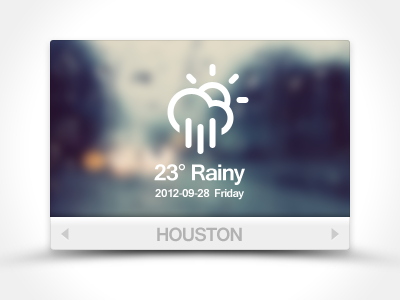
<style>
.page{position:relative;width:400px;height:300px}
.page>*{position:absolute;margin:0}
.t1{font:24px "Gautami-Bold";letter-spacing:-0.05em;color:#ffffff}
.t2{font:12px "Gautami-Bold";letter-spacing:-0.05em;color:#ffffff}
.t3{font:20px "Gautami-Bold";letter-spacing:-0.05em;color:#b2b2b2;text-transform:uppercase}
</style>
<div class="page">
<p class="t1" style="left:154px;top:164px;width:91px;height:21px">23° Rainy</p>
<p class="t2" style="left:155px;top:189px;width:89px;height:11px">2012-09-28  Friday</p>
<p class="t3" style="left:157px;top:227px;width:85px;height:15px">Houston</p>
</div>
